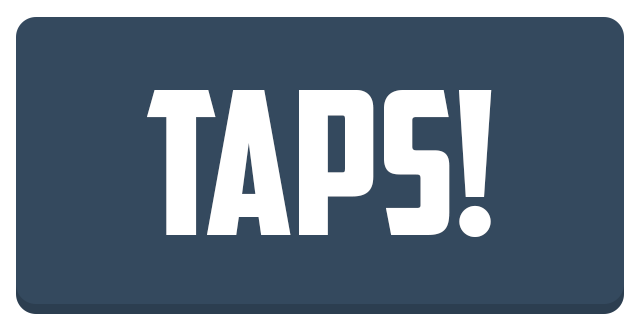
<style>
.page{position:relative;width:640px;height:320px;background:#34495e}
.page>*{position:absolute;margin:0}
.t1{font:200px "AmericanCaptain";color:#ffffff}
</style>
<div class="page">
<p class="t1" style="left:147px;top:90px;width:345px;height:147px">Taps!</p>
</div>
